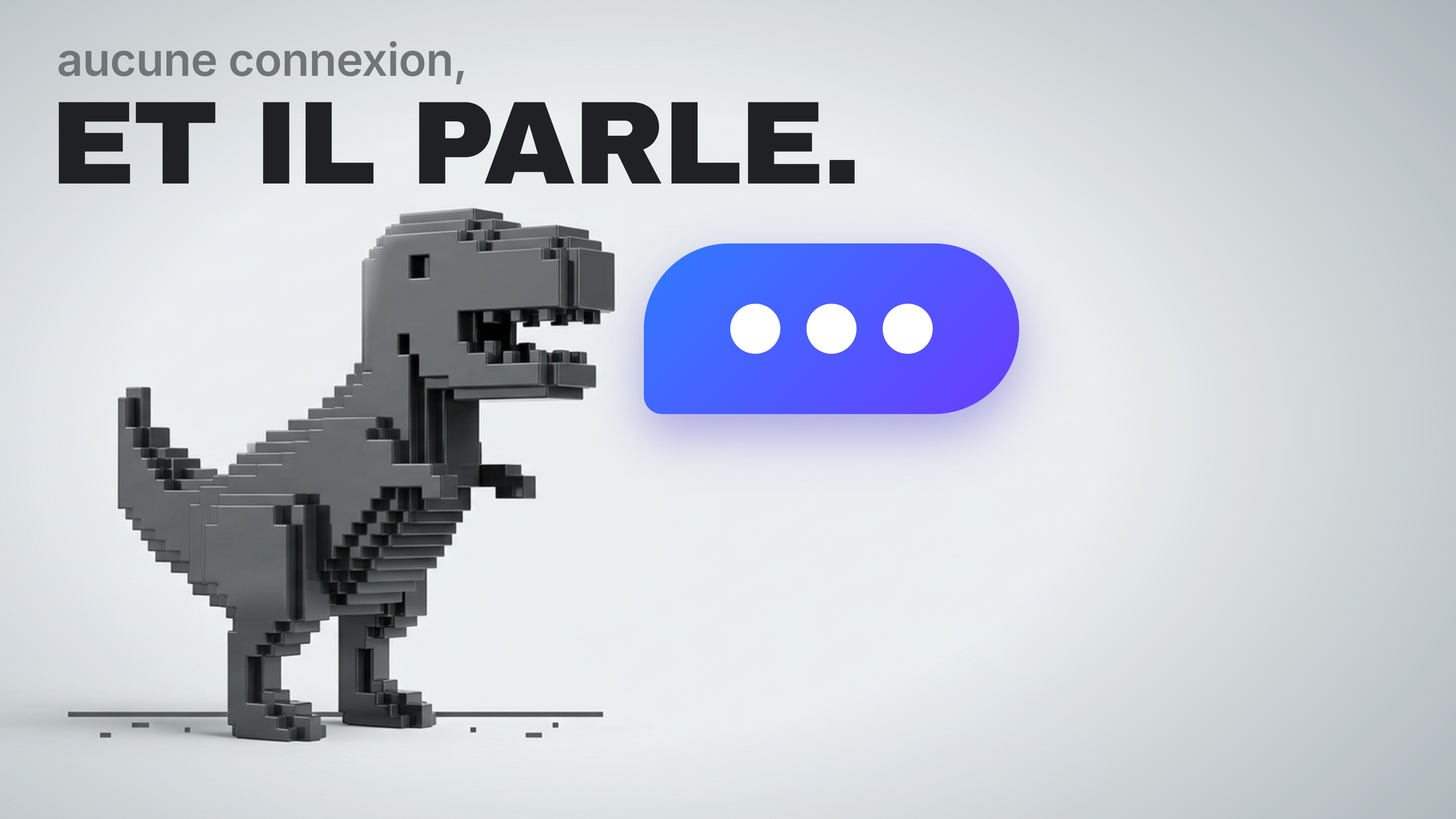
<style>
.page{position:relative;width:1456px;height:819px}
.page>*{position:absolute;margin:0}
.t1{font:45.5px "Inter-ExtraBold";letter-spacing:-0.01em;color:#70757a}
.t2{font:118.3px "ArchivoBlack-Regular";letter-spacing:-0.02em;color:#202124}
</style>
<div class="page">
<p class="t1" style="left:58px;top:41px;width:406px;height:44px">aucune connexion,</p>
<p class="t2" style="left:58px;top:102px;width:797px;height:82px">ET IL PARLE.</p>
</div>
